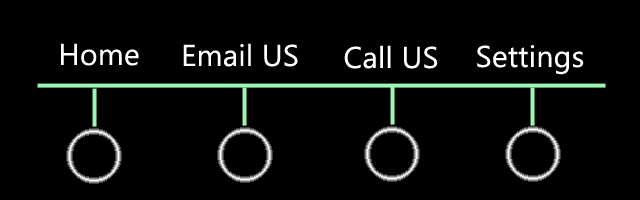
<style>
.page{position:relative;width:640px;height:200px;background:#000000}
.page>*{position:absolute;margin:0}
.t1{font:30px "LaoUI";letter-spacing:0.01em;color:#ffffff}
</style>
<div class="page">
<p class="t1" style="left:61px;top:43px;width:78px;height:23px">Home</p>
<p class="t1" style="left:183px;top:43px;width:115px;height:24px">Email US</p>
<p class="t1" style="left:344px;top:45px;width:94px;height:24px">Call US</p>
<p class="t1" style="left:477px;top:45px;width:107px;height:30px">Settings</p>
</div>
